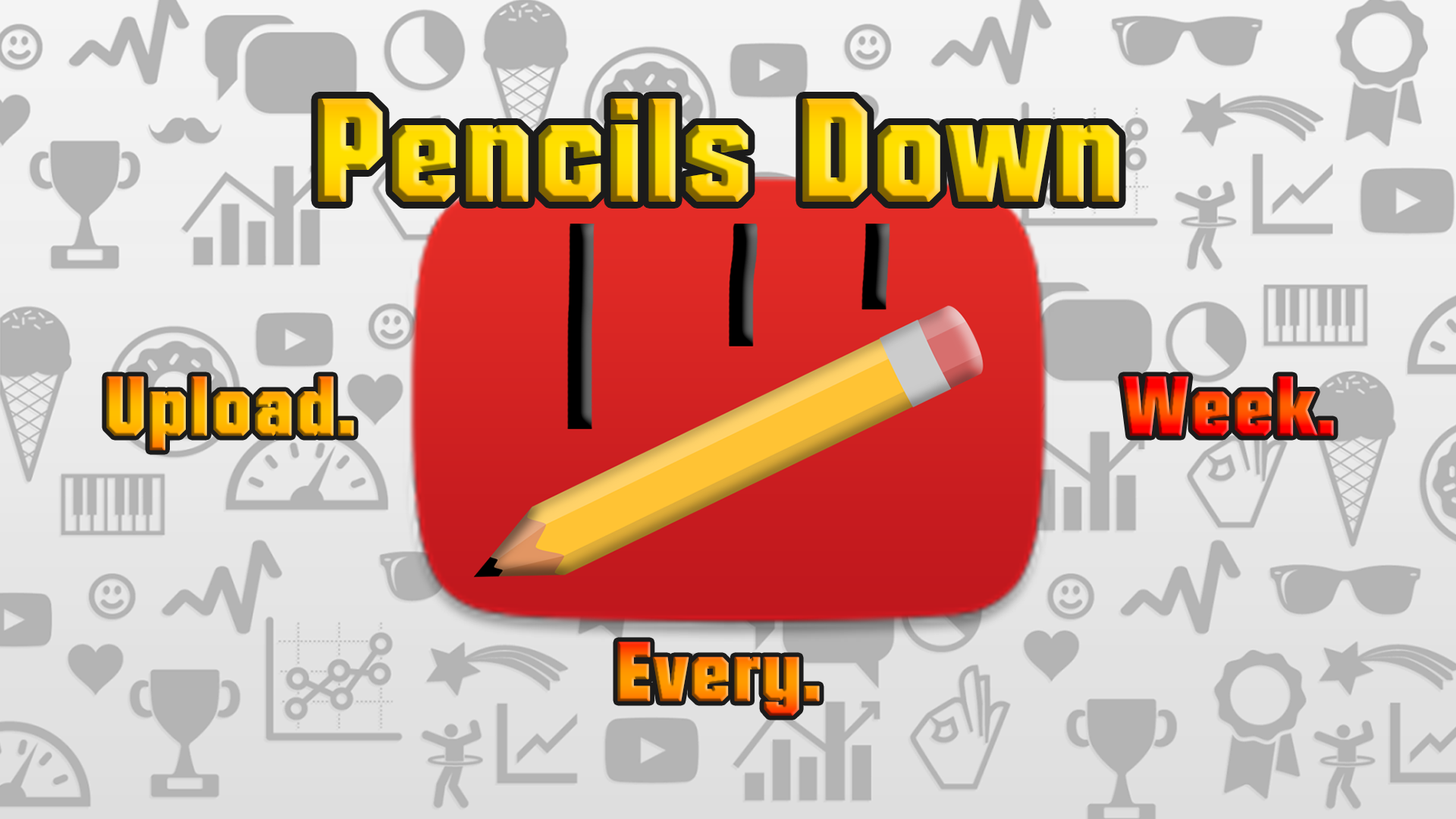
<style>
.page{position:relative;width:1456px;height:819px}
.page>*{position:absolute;margin:0}
.t1{font:140.6px "Autumn";font-weight:bold}
.t2{font:81.2px "Autumn";font-weight:bold}
</style>
<div class="page">
<p class="t1" style="left:318px;top:99px;width:801px;height:103px">Pencils Down</p>
<p class="t2" style="left:106px;top:376px;width:248px;height:74px">Upload.</p>
<p class="t2" style="left:1122px;top:376px;width:212px;height:60px">Week.</p>
<p class="t2" style="left:617px;top:642px;width:203px;height:74px">Every.</p>
</div>
